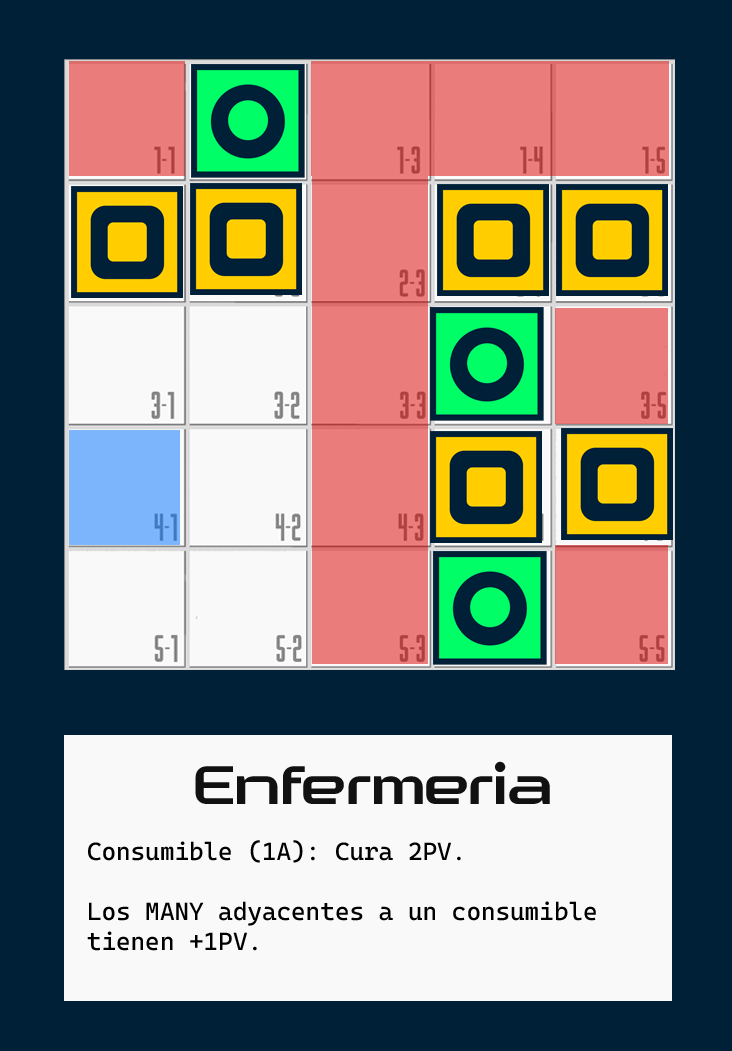
<style>
.page{position:relative;width:732px;height:1051px;background:#002038}
.page>*{position:absolute;margin:0}
.t1{font:54px "AstroheadFREERegular";color:#111111}
.t2{font:24.9px "CascadiaCode-Regular";color:#000000}
</style>
<div class="page">
<p class="t1" style="left:195px;top:761px;width:355px;height:43px">Enfermería</p>
<p class="t2" style="left:87px;top:840px;width:509px;height:111px">Consumible (1A): Cura 2PV. <br><br>Los MANY adyacentes a un consumible tienen +1PV.</p>
</div>
